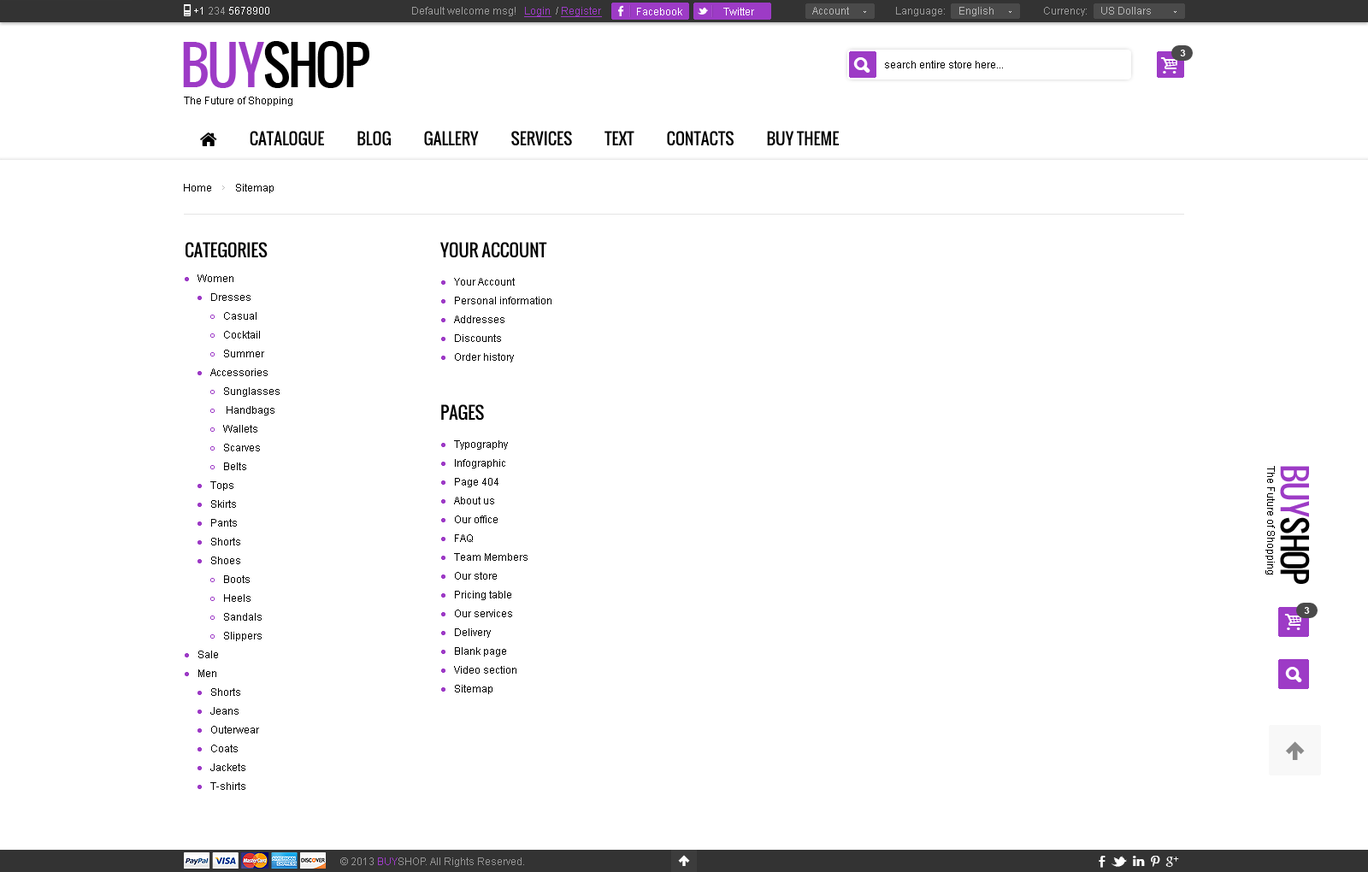
<style>
.page{position:relative;width:1368px;height:872px;background:#ffffff}
.page>*{position:absolute;margin:0}
.t1{font:10.3px "ArialMT";color:#ffffff}
.t2{font:10.3px "ArialMT";color:#9b9b9b}
.t3{font:10.3px "ArialMT";color:#9d3bc6;text-decoration:underline}
.t4{font:10.3px "ArialMT";color:#b6b6b6}
.t5{font:51.3px "Oswald";letter-spacing:-0.06em;color:#000000;text-transform:uppercase}
.t6{font:51.3px "Oswald";letter-spacing:-0.06em;color:#9d3bc6;text-transform:uppercase}
.t7{font:9.4px "Arial-BoldMT";color:#ffffff;text-transform:uppercase}
.t8{font:10.3px "ArialMT";color:#000000}
.t9{font:17.1px "Oswald";color:#000000;text-transform:uppercase}
.t10{font:10.3px/18.8px "ArialMT";color:#000000}
.t11{font:10.3px/5.1px "ArialMT";color:#9d3bc6}
.t12{font:10.3px/18.8px "ArialMT";color:#9d3bc6}
.t13{font:32.5px "Oswald";letter-spacing:-0.06em;color:#000000;text-transform:uppercase}
.t14{font:32.5px "Oswald";letter-spacing:-0.06em;color:#9d3bc6;text-transform:uppercase}
.t15{font:10.3px "ArialMT";color:#959595}
.t16{font:10.3px "ArialMT";color:#9d3bc6}
</style>
<div class="page">
<p class="t1" style="left:194px;top:7px;width:75px;height:8px">+1 <span class="t2">234 </span>5678900</p>
<p class="t2" style="left:412px;top:7px;width:190px;height:10px">Default welcome msg!   <span class="t3">Login </span> / <span class="t3">Register</span></p>
<p class="t2" style="left:412px;top:7px;width:190px;height:10px">Default welcome msg!   <span class="t3">Login </span> / <span class="t3">Register</span></p>
<p class="t1" style="left:637px;top:8px;width:45px;height:7px">Facebook</p>
<p class="t1" style="left:723px;top:8px;width:31px;height:7px">Twitter</p>
<p class="t4" style="left:812px;top:7px;width:37px;height:8px">Account</p>
<p class="t2" style="left:896px;top:7px;width:97px;height:9px">Language:     <span class="t4">English</span></p>
<p class="t4" style="left:1044px;top:7px;width:107px;height:9px"><span class="t2">Currency:     </span>US Dollars</p>
<p class="t5" style="left:183px;top:41px;width:186px;height:47px"><span class="t6">buy</span>shop</p>
<p class="t7" style="left:1180px;top:50px;width:6px;height:6px">3</p>
<p class="t8" style="left:885px;top:61px;width:118px;height:7px">search entire store here...</p>
<p class="t8" style="left:184px;top:97px;width:108px;height:9px">The Future of Shopping</p>
<p class="t8" style="left:184px;top:184px;width:90px;height:9px">Home         Sitemap</p>
<p class="t9" style="left:185px;top:242px;width:83px;height:16px">Categories</p>
<p class="t9" style="left:440px;top:242px;width:107px;height:16px">Your Account</p>
<p class="t10" style="left:185px;top:274px;width:95px;height:516px"><span class="t11">●   </span>Women<br>     <span class="t11">●   </span>Dresses<br>          <span class="t12">○   </span>Casual<br>          <span class="t12">○   </span>Cocktail<br>          <span class="t12">○   </span>Summer<br>     <span class="t11">●   </span>Accessories<br>          <span class="t12">○   </span>Sunglasses<br>          <span class="t12">○    </span>Handbags<br>          <span class="t12">○   </span>Wallets<br>          <span class="t12">○   </span>Scarves<br>          <span class="t12">○   </span>Belts<br>     <span class="t11">●   </span>Tops<br>     <span class="t11">●   </span>Skirts<br>     <span class="t11">●   </span>Pants<br>     <span class="t11">●   </span>Shorts<br>     <span class="t11">●   </span>Shoes<br>          <span class="t12">○   </span>Boots<br>          <span class="t12">○   </span>Heels<br>          <span class="t12">○   </span>Sandals<br>          <span class="t12">○   </span>Slippers<br><span class="t11">●   </span>Sale<br><span class="t11">●   </span>Men<br>     <span class="t11">●   </span>Shorts<br>     <span class="t11">●   </span>Jeans<br>     <span class="t11">●   </span>Outerwear<br>     <span class="t11">●   </span>Coats<br>     <span class="t11">●   </span>Jackets<br>     <span class="t11">●   </span>T-shirts</p>
<p class="t10" style="left:441px;top:278px;width:110px;height:84px"><span class="t11">●   </span>Your Account<br><span class="t11">●   </span>Personal information<br><span class="t11">●   </span>Addresses<br><span class="t11">●   </span>Discounts<br><span class="t11">●   </span>Order history</p>
<p class="t9" style="left:441px;top:404px;width:43px;height:17px">Pages</p>
<p class="t10" style="left:441px;top:440px;width:86px;height:254px"><span class="t11">●   </span>Typography<br><span class="t11">●   </span>Infographic<br><span class="t11">●   </span>Page 404<br><span class="t11">●   </span>About us<br><span class="t11">●   </span>Our office<br><span class="t11">●   </span>FAQ<br><span class="t11">●   </span>Team Members<br><span class="t11">●   </span>Our store<br><span class="t11">●   </span>Pricing table<br><span class="t11">●   </span>Our services<br><span class="t11">●   </span>Delivery<br><span class="t11">●   </span>Blank page<br><span class="t11">●   </span>Video section<br><span class="t11">●   </span>Sitemap</p>
<p class="t8" style="left:1265px;top:466px;width:9px;height:108px;rotate:90deg">The Future of Shopping</p>
<p class="t13" style="left:1280px;top:466px;width:30px;height:118px;rotate:90deg"><span class="t14">buy</span>shop</p>
<p class="t7" style="left:1304px;top:607px;width:6px;height:7px">3</p>
<p class="t15" style="left:340px;top:857px;width:184px;height:10px">© 2013 <span class="t16">BUY</span>SHOP. All Rights Reserved.</p>
</div>
